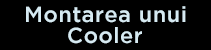
<style>
.page{position:relative;width:211px;height:50px;background:#000000}
.page>*{position:absolute;margin:0}
.t1{font:21.7px "GothamMedium";letter-spacing:0.025em;color:#d6eaf2}
</style>
<div class="page">
<p class="t1" style="left:26px;top:6px;width:160px;height:17px">Montarea unui</p>
<p class="t1" style="left:68px;top:27px;width:74px;height:17px">Cooler</p>
</div>
